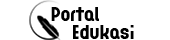
<style>
.page{position:relative;width:170px;height:40px;background:#ffffff}
.page>*{position:absolute;margin:0}
.t1{font:19.7px "GRAFIKATYPE.1-Regular";color:#000000}
.t2{font:19.8px "GRAFIKATYPE.1-Regular";color:#000000}
</style>
<div class="page">
<p class="t1" style="left:51px;top:7px;width:48px;height:14px">Portal</p>
<p class="t2" style="left:73px;top:25px;width:61px;height:14px">Edukasi</p>
</div>
